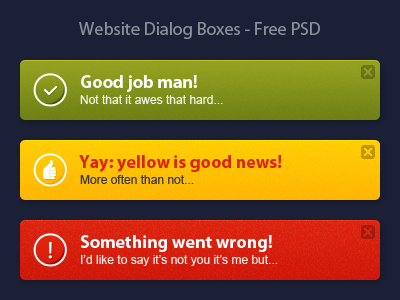
<style>
.page{position:relative;width:400px;height:300px;background:#1b2036}
.page>*{position:absolute;margin:0}
.t1{font:18px "MyriadPro-Regular";color:#8d909b}
.t2{font:18px "MyriadPro-Bold";color:#ffffff}
.t3{font:12px "ArialMT";color:#ffffff}
.t4{font:18px "MyriadPro-Bold";color:#dd220d}
.t5{font:12px "ArialMT";color:#393939}
</style>
<div class="page">
<p class="t1" style="left:79px;top:22px;width:241px;height:17px">Website Dialog Boxes - Free PSD</p>
<p class="t2" style="left:81px;top:75px;width:116px;height:17px">Good job man!</p>
<p class="t3" style="left:80px;top:95px;width:143px;height:9px;opacity:0.9">Not that it awes that hard...</p>
<p class="t4" style="left:79px;top:155px;width:203px;height:17px">Yay: yellow is good news!</p>
<p class="t5" style="left:80px;top:175px;width:114px;height:9px">More often than not...</p>
<p class="t2" style="left:80px;top:235px;width:192px;height:17px">Something went wrong!</p>
<p class="t3" style="left:81px;top:255px;width:197px;height:11px;opacity:0.9">I’d like to say it’s not you it’s me but...</p>
</div>
